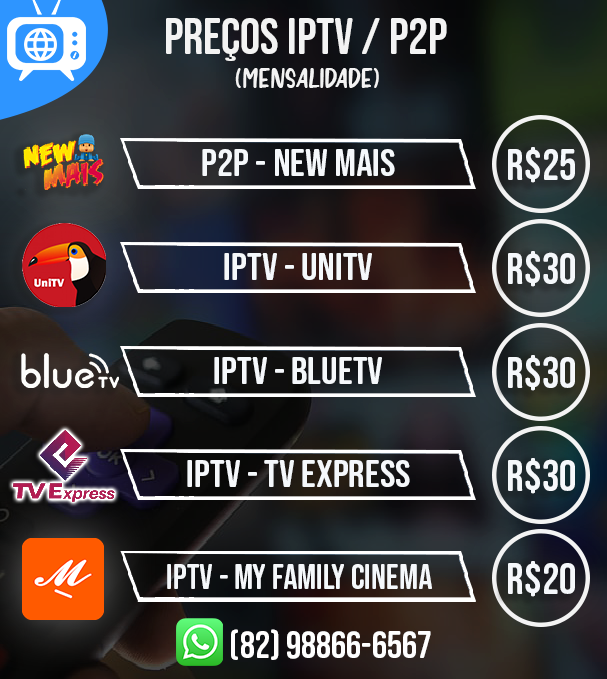
<style>
.page{position:relative;width:607px;height:679px}
.page>*{position:absolute;margin:0}
.t1{font:50px "BebasNeueSemiRounded";color:#f3f3f3}
.t2{font:28.2px "RINTIKSENDU";color:#f3f3f3}
.t3{font:38.2px "BebasNeueSemiRounded";color:#f5f8fb;scale:1.06 1}
.t4{font:43.9px "BebasNeueSemiRounded";color:#f5f8fb}
.t5{font:35.2px "BebasNeueSemiRounded";color:#f5f8fb}
.t6{font:37.6px "BebasNeueSemiRounded";color:#ffffff}
</style>
<div class="page">
<p class="t1" style="left:166px;top:18px;width:281px;height:43px">PREÇOS IPTV / P2P</p>
<p class="t2" style="left:235px;top:68px;width:144px;height:20px">(MENSALIDADE)</p>
<p class="t3" style="left:202px;top:149px;width:193px;height:27px">p2p - new mais</p>
<p class="t4" style="left:508px;top:147px;width:67px;height:36px">R$25</p>
<p class="t3" style="left:224px;top:253px;width:148px;height:27px">iptv - unitv</p>
<p class="t4" style="left:508px;top:251px;width:67px;height:36px">R$30</p>
<p class="t3" style="left:214px;top:357px;width:168px;height:27px">iptv - bluetv</p>
<p class="t4" style="left:508px;top:355px;width:67px;height:36px">R$30</p>
<p class="t3" style="left:187px;top:460px;width:223px;height:27px">iptv - tv express</p>
<p class="t4" style="left:508px;top:458px;width:67px;height:36px">R$30</p>
<p class="t5" style="left:167px;top:564px;width:265px;height:25px">iptv - my family cinema</p>
<p class="t4" style="left:508px;top:561px;width:67px;height:36px">R$20</p>
<p class="t6" style="left:231px;top:629px;width:200px;height:31px">(82) 98866-6567</p>
</div>
